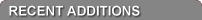
<style>
.page{position:relative;width:202px;height:20px;background:#858585}
.page>*{position:absolute;margin:0}
.t1{font:13.3px "Arial-BoldMT";color:#ffffff}
</style>
<div class="page">
<p class="t1" style="left:9px;top:5px;width:131px;height:11px">RECENT ADDITIONS</p>
</div>
